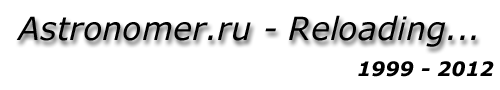
<style>
.page{position:relative;width:500px;height:90px;background:#ffffff}
.page>*{position:absolute;margin:0}
.t1{font:32px "Verdana-Italic";color:#000000}
.t2{font:20px "Verdana-BoldItalic";color:#000000}
</style>
<div class="page">
<p class="t1" style="left:16px;top:15px;width:460px;height:32px">Astronomer.ru - Reloading...</p>
<p class="t2" style="left:358px;top:61px;width:136px;height:16px">1999 - 2012</p>
</div>
